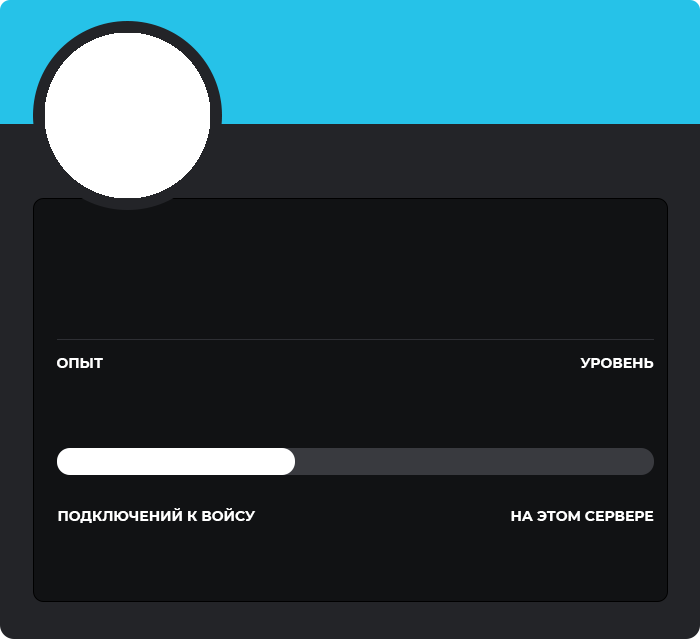
<style>
.page{position:relative;width:700px;height:639px;background:#111214}
.page>*{position:absolute;margin:0}
.t1{font:14px "Montserrat-Bold";color:#ffffff}
</style>
<div class="page">
<p class="t1" style="left:57px;top:358px;width:46px;height:10px">ОПЫТ</p>
<p class="t1" style="left:580px;top:358px;width:74px;height:10px">УРОВЕНЬ</p>
<p class="t1" style="left:58px;top:508px;width:198px;height:15px">ПОДКЛЮЧЕНИЙ К ВОЙСУ</p>
<p class="t1" style="left:511px;top:511px;width:143px;height:10px">НА ЭТОМ СЕРВЕРЕ</p>
</div>
